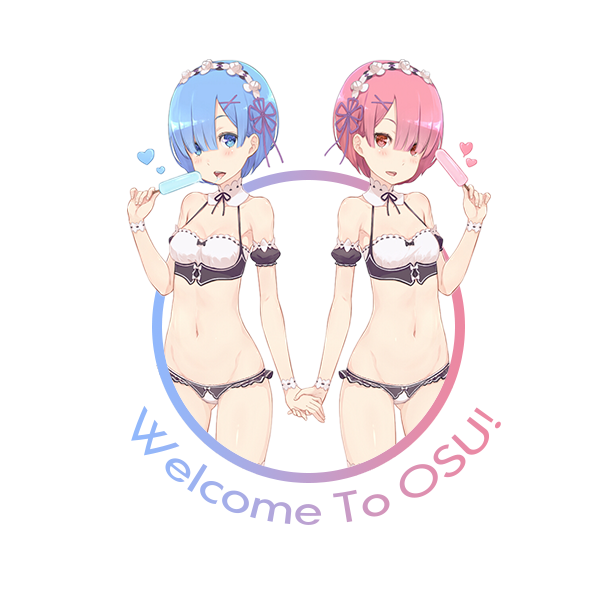
<style>
.page{position:relative;width:600px;height:600px;background:#ffffff}
.page>*{position:absolute;margin:0}
.t1{font:40.2px/23px "HKExplorerSharp-Regular";letter-spacing:-0.035em}
</style>
<div class="page">
<p class="t1" style="left:131px;top:405px;width:370px;height:120px">Welcome To OSU!</p>
</div>
